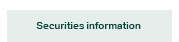
<style>
.page{position:relative;width:179px;height:42px;background:#e6eeeb}
.page>*{position:absolute;margin:0}
.t1{font:10px "AktivGrotesk-Medium";letter-spacing:0.005em;color:#03483a}
</style>
<div class="page">
<p class="t1" style="left:36px;top:22px;width:105px;height:7px">Securities information</p>
</div>
